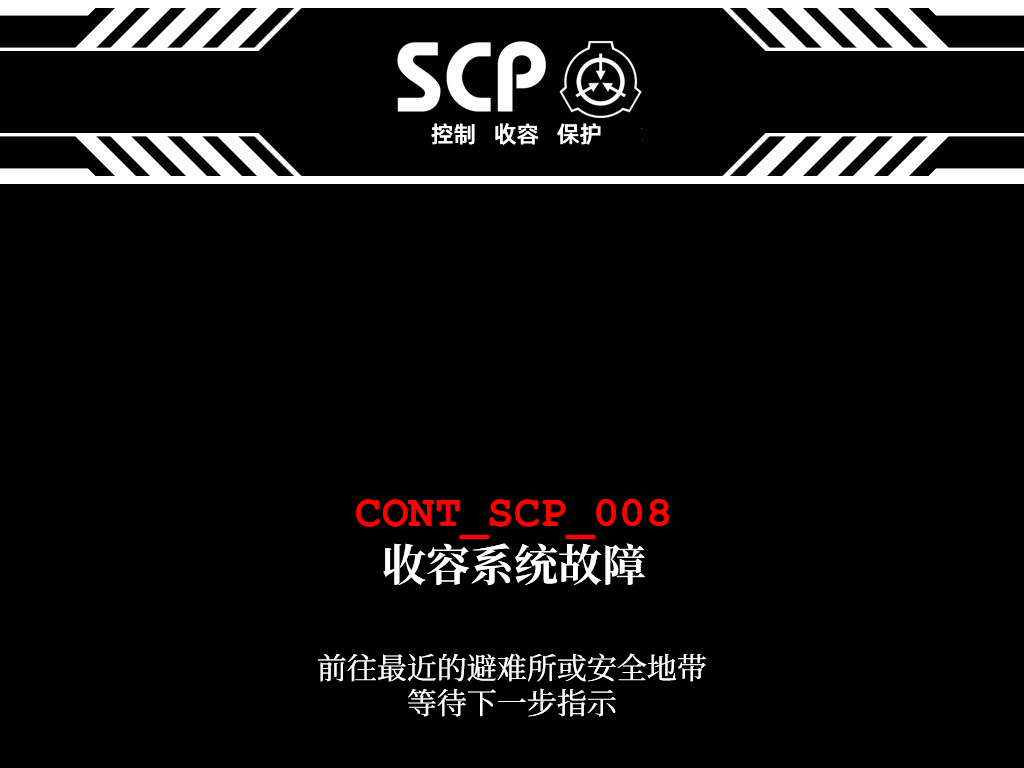
<style>
.page{position:relative;width:1024px;height:768px;background:#000000}
.page>*{position:absolute;margin:0}
.t1{font:23px "AlibabaPuHuiTiM";color:#ffffff}
.t2{font:44px/55px "ContainmentBreach-Bold";color:#ff0000}
.t3{font:44px/55px "CourierNewPS-BoldMT";color:#ff0000}
.t4{font:44px/55px "ContainmentBreach-Bold";color:#ffffff}
.t5{font:30px/35px "ContainmentBreach-Regular";color:#ffffff}
</style>
<div class="page">
<p class="t1" style="left:431px;top:123px;width:170px;height:22px">控制   收容   保护</p>
<p class="t2" style="left:356px;top:499px;width:313px;height:87px;text-align:center">CONT_SCP_<span class="t3">008<br></span><span class="t4">收容系统故障</span></p>
<p class="t5" style="left:317px;top:653px;width:389px;height:64px;text-align:center">前往最近的避难所或安全地带<br>等待下一步指示</p>
</div>
